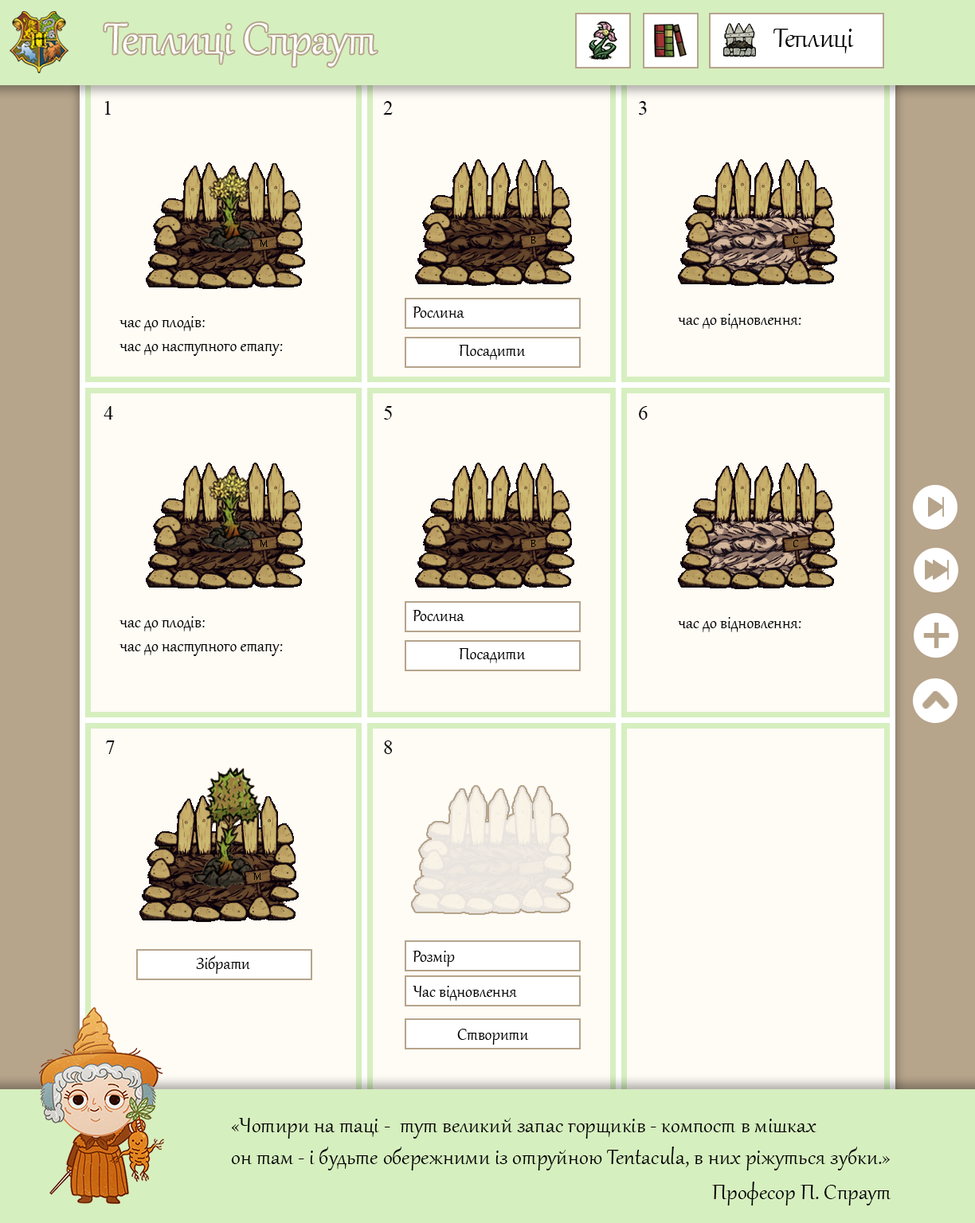
<style>
.page{position:relative;width:975px;height:1223px;background:#fffbf5}
.page>*{position:absolute;margin:0}
.t1{font:53.1px "Gabriola";color:#ffffff}
.t2{font:33.2px "Gabriola";color:#000000}
.t3{font:19.9px "TimesNewRomanPSMT";color:#000000}
.t4{font:19.9px "Gabriola";color:#000000}
.t5{font:53.1px "ArialMT";color:#b6a48b}
.t6{font:26.5px "Gabriola";color:#000000}
</style>
<div class="page">
<p class="t1" style="left:104px;top:22px;width:273px;height:45px">Теплиці Спраут</p>
<p class="t2" style="left:773px;top:29px;width:81px;height:24px">Теплиці</p>
<p class="t3" style="left:105px;top:101px;width:6px;height:14px">1</p>
<p class="t3" style="left:383px;top:101px;width:10px;height:14px">2</p>
<p class="t3" style="left:639px;top:101px;width:8px;height:14px">3</p>
<p class="t4" style="left:119px;top:316px;width:164px;height:40px">час до плодів:<br>час до наступного етапу:</p>
<p class="t4" style="left:413px;top:307px;width:51px;height:11px">Рослина</p>
<p class="t4" style="left:678px;top:314px;width:123px;height:15px">час до відновлення:</p>
<p class="t4" style="left:459px;top:345px;width:67px;height:15px">Посадити</p>
<p class="t3" style="left:104px;top:406px;width:9px;height:14px">4</p>
<p class="t3" style="left:384px;top:406px;width:8px;height:14px">5</p>
<p class="t3" style="left:639px;top:406px;width:8px;height:14px">6</p>
<p class="t4" style="left:119px;top:616px;width:164px;height:40px">час до плодів:<br>час до наступного етапу:</p>
<p class="t4" style="left:413px;top:610px;width:51px;height:11px">Рослина</p>
<p class="t4" style="left:678px;top:617px;width:123px;height:15px">час до відновлення:</p>
<p class="t5" style="left:923px;top:623px;width:26px;height:25px">+</p>
<p class="t4" style="left:459px;top:648px;width:67px;height:15px">Посадити</p>
<p class="t3" style="left:106px;top:741px;width:9px;height:13px">7</p>
<p class="t3" style="left:384px;top:741px;width:9px;height:13px">8</p>
<p class="t4" style="left:413px;top:951px;width:42px;height:16px">Розмір</p>
<p class="t4" style="left:196px;top:956px;width:54px;height:18px">Зібрати</p>
<p class="t4" style="left:413px;top:986px;width:104px;height:15px">Час відновлення</p>
<p class="t4" style="left:457px;top:1029px;width:72px;height:16px">Створити</p>
<p class="t6" style="left:231px;top:1118px;width:659px;height:53px">«Чотири на таці -  тут великий запас горщиків - компост в мішках<br>он там - і будьте обережними із отруйною Tentacula, в них ріжуться зубки.»</p>
<p class="t6" style="left:712px;top:1182px;width:179px;height:24px">Професор П. Спраут</p>
</div>
